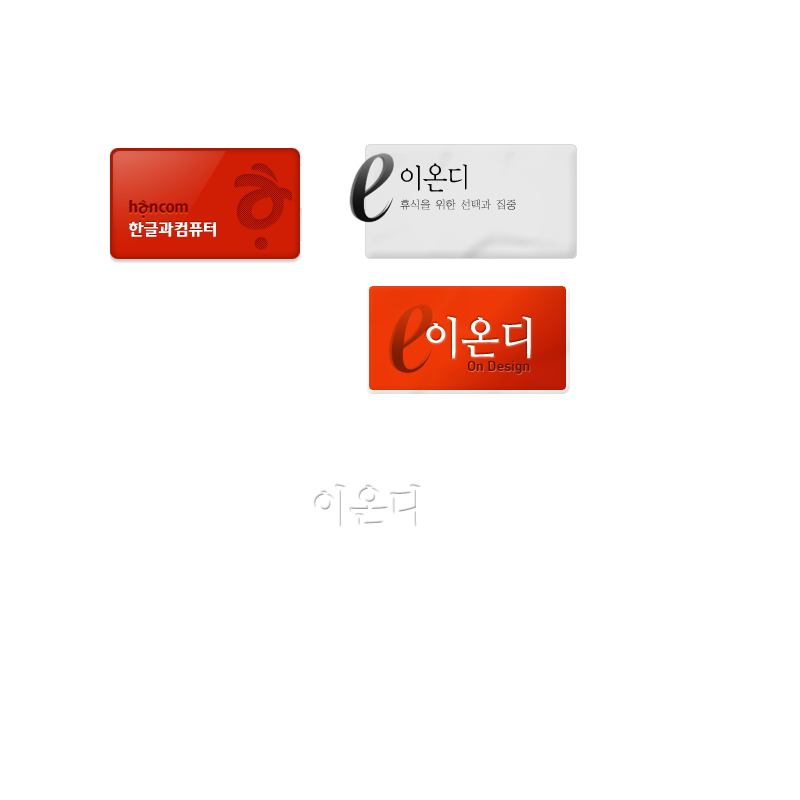
<style>
.page{position:relative;width:800px;height:800px;background:#ffffff}
.page>*{position:absolute;margin:0}
.t1{font:11px "Jabmlv50"}
.t2{font:44px "NanumMyeongjoBold";color:#ffffff;scale:0.91 1}
.t3{font:14px "Dinmed";color:#5e1602}
</style>
<div class="page">
<p class="t1" style="left:400px;top:199px;width:116px;height:11px">휴식을 위한 선택과 집중</p>
<p class="t2" style="left:426px;top:316px;width:105px;height:43px">이온디</p>
<p class="t3" style="left:468px;top:361px;width:62px;height:13px">On Design</p>
</div>
